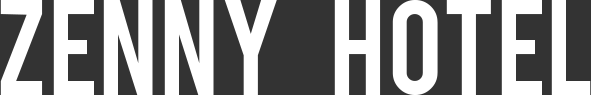
<style>
.page{position:relative;width:591px;height:95px;background:#333333}
.page>*{position:absolute;margin:0}
.t1{font:105px "Bebas";color:#ffffff}
</style>
<div class="page">
<p class="t1" style="left:0px;top:0px;width:591px;height:95px">ZENNY     HOTEL</p>
</div>
